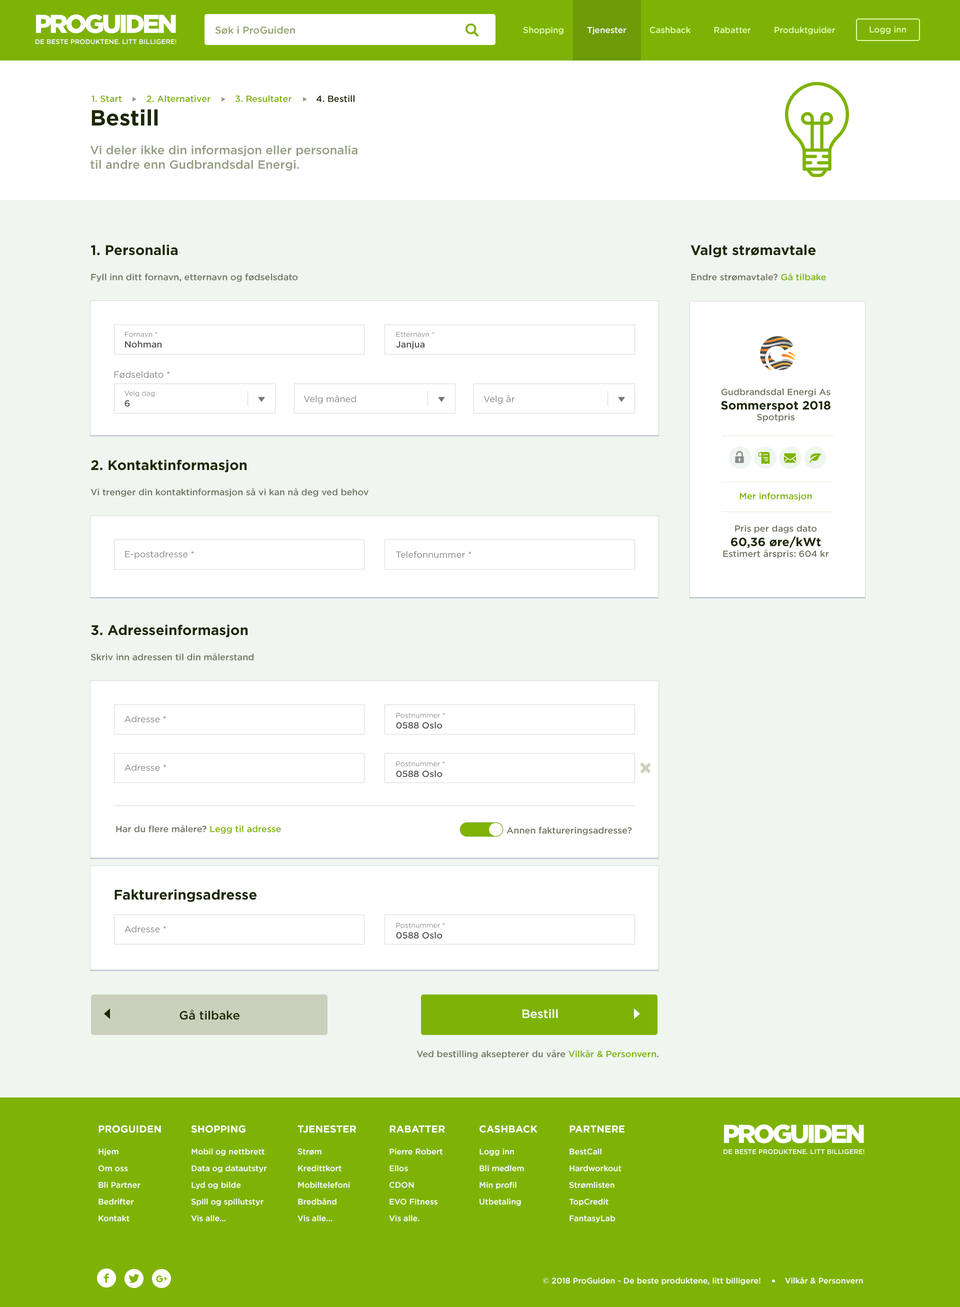
<style>
.page{position:relative;width:960px;height:1307px;background:#eff6ef}
.page>*{position:absolute;margin:0}
.t1{font:6.6px/11.1px "Gotham-Medium";color:#ffffff}
.t2{font:25.7px/42.6px "Gotham-Black";letter-spacing:-0.09em;color:#ffffff}
.t3{font:10px "Gotham-Medium";color:#93a36e}
.t4{font:8.5px "Gotham-Medium";color:#e4feaa}
.t5{font:8.5px "Gotham-Medium";color:#ffffff}
.t6{font:9px "Gotham-Medium";color:#7eb306}
.t7{font:9px "Gotham-Medium";color:#1c2702}
.t8{font:12px "Gotham-Medium";color:#939d81}
.t9{font:22px "Gotham-Bold";color:#1c2702}
.t10{font:9px "Gotham-Medium";color:#6f7762}
.t11{font:14px "Gotham-Bold";color:#1c2702}
.t12{font:7px "Gotham-Book";color:#828282}
.t13{font:9px "Gotham-Medium";color:#535353}
.t14{font:9px "Gotham-Book";color:#818181}
.t15{font:12px "Gotham-Bold";color:#1c2702}
.t16{font:12px "Gotham-Medium";color:#1c2702}
.t17{font:12px "Gotham-Medium";color:#ffffff}
.t18{font:8px/16.7px "Gotham-Medium";color:#ffffff}
.t19{font:10px/5.2px "Gotham-Bold";color:#ffffff}
.t20{font:8px "Gotham-Medium";color:#ffffff}
</style>
<div class="page">
<p class="t1" style="left:36px;top:14px;width:140px;height:30px;text-align:center"><span class="t2">PROGUIDEN<br></span>DE BESTE PRODUKTENE. LITT BILLIGERE!</p>
<p class="t3" style="left:215px;top:26px;width:80px;height:8px">Søk i ProGuiden</p>
<p class="t4" style="left:523px;top:26px;width:313px;height:8px">Shopping         <span class="t5">Tjenester</span>         Cashback         Rabatter         Produktguider</p>
<p class="t4" style="left:870px;top:26px;width:36px;height:8px">Logg inn</p>
<p class="t6" style="left:92px;top:95px;width:262px;height:7px">1. Start         2. Alternativer         3. Resultater         <span class="t7">4. Bestill</span></p>
<p class="t8" style="left:90px;top:109px;width:268px;height:62px"><span class="t9">Bestill<br></span><br>Vi deler ikke din informasjon eller personalia <br>til andre enn Gudbrandsdal Energi.</p>
<p class="t10" style="left:90px;top:244px;width:208px;height:38px"><span class="t11">1. Personalia<br><br></span>Fyll inn ditt fornavn, etternavn og fødselsdato</p>
<p class="t10" style="left:690px;top:244px;width:136px;height:36px"><span class="t11">Valgt strømavtale<br><br></span>Endre strømavtale? <span class="t6">Gå tilbake</span></p>
<p class="t12" style="left:125px;top:332px;width:37px;height:16px">Fornavn *<br><span class="t13">Nohman</span></p>
<p class="t12" style="left:396px;top:332px;width:38px;height:17px">Etternavn *<br><span class="t13">Janjua</span></p>
<p class="t14" style="left:114px;top:371px;width:56px;height:7px">Fødseldato *</p>
<p class="t10" style="left:721px;top:388px;width:109px;height:170px;text-align:center">Gudbrandsdal Energi As<br><span class="t15">Sommerspot 2018<br></span>Spotpris<br><br><br><br><br><br><br><br><br><br><span class="t6">Mer informasjon<br><br><br></span>Pris per dags dato<br><span class="t15">60,36 øre/kWt<br></span>Estimert årspris: 604 kr<br><br>kr<br>: 298 kr</p>
<p class="t12" style="left:124px;top:390px;width:30px;height:17px">Velg dag<br><span class="t13">6</span></p>
<p class="t14" style="left:304px;top:394px;width:52px;height:10px">Velg måned</p>
<p class="t14" style="left:484px;top:394px;width:31px;height:10px">Velg år</p>
<p class="t10" style="left:90px;top:460px;width:278px;height:37px"><span class="t11">2. Kontaktinformasjon<br><br></span>Vi trenger din kontaktinformasjon så vi kan nå deg ved behov</p>
<p class="t14" style="left:125px;top:550px;width:69px;height:9px">E-postadresse *</p>
<p class="t14" style="left:396px;top:551px;width:76px;height:7px">Telefonnummer *</p>
<p class="t10" style="left:90px;top:624px;width:164px;height:36px"><span class="t11">3. Adresseinformasjon<br><br></span>Skriv inn adressen til din målerstand</p>
<p class="t12" style="left:396px;top:712px;width:49px;height:17px">Postnummer *<br><span class="t13">0588 Oslo</span></p>
<p class="t14" style="left:124px;top:716px;width:42px;height:6px">Adresse *</p>
<p class="t12" style="left:396px;top:761px;width:49px;height:17px">Postnummer *<br><span class="t13">0588 Oslo</span></p>
<p class="t14" style="left:124px;top:764px;width:42px;height:7px">Adresse *</p>
<p class="t10" style="left:116px;top:824px;width:165px;height:10px">Har du flere målere?<span class="t6"> Legg til adresse</span></p>
<p class="t10" style="left:506px;top:826px;width:126px;height:9px">Annen faktureringsadresse?</p>
<p class="t11" style="left:114px;top:889px;width:143px;height:13px">Faktureringsadresse</p>
<p class="t14" style="left:124px;top:926px;width:42px;height:6px">Adresse *</p>
<p class="t12" style="left:396px;top:922px;width:49px;height:17px">Postnummer *<br><span class="t13">0588 Oslo</span></p>
<p class="t16" style="left:180px;top:1010px;width:60px;height:10px">Gå tilbake</p>
<p class="t17" style="left:522px;top:1009px;width:36px;height:9px">Bestill</p>
<p class="t10" style="left:416px;top:1050px;width:242px;height:9px">Ved bestilling aksepterer du våre <span class="t6">Vilkår &amp; Personvern</span>.</p>
<p class="t18" style="left:98px;top:1125px;width:63px;height:97px"><span class="t19">PROGUIDEN<br><br></span>Hjem<br>Om oss<br>Bli Partner<br>Bedrifter<br>Kontakt</p>
<p class="t18" style="left:191px;top:1125px;width:76px;height:97px"><span class="t19">SHOPPING<br><br></span>Mobil og nettbrett<br>Data og datautstyr<br>Lyd og bilde<br>Spill og spillutstyr<br>Vis alle...</p>
<p class="t18" style="left:298px;top:1125px;width:58px;height:97px"><span class="t19">TJENESTER<br><br></span>Strøm<br>Kredittkort<br>Mobiltelefoni<br>Bredbånd <br>Vis alle...</p>
<p class="t18" style="left:389px;top:1126px;width:56px;height:96px"><span class="t19">RABATTER<br><br></span>Pierre Robert<br>Ellos<br>CDON<br>EVO Fitness<br>Vis alle.</p>
<p class="t18" style="left:480px;top:1125px;width:58px;height:81px"><span class="t19">CASHBACK <br><br></span>Logg inn<br>Bli medlem<br>Min profil<br>Utbetaling</p>
<p class="t18" style="left:569px;top:1126px;width:55px;height:96px"><span class="t19">PARTNERE<br><br></span>BestCall<br>Hardworkout<br>Strømlisten<br>TopCredit<br>FantasyLab</p>
<p class="t1" style="left:724px;top:1124px;width:140px;height:30px;text-align:center"><span class="t2">PROGUIDEN<br></span>DE BESTE PRODUKTENE. LITT BILLIGERE!</p>
<p class="t20" style="left:543px;top:1277px;width:320px;height:8px">© 2018 ProGuiden - De beste produktene, litt billigere!          Vilkår &amp; Personvern</p>
</div>
